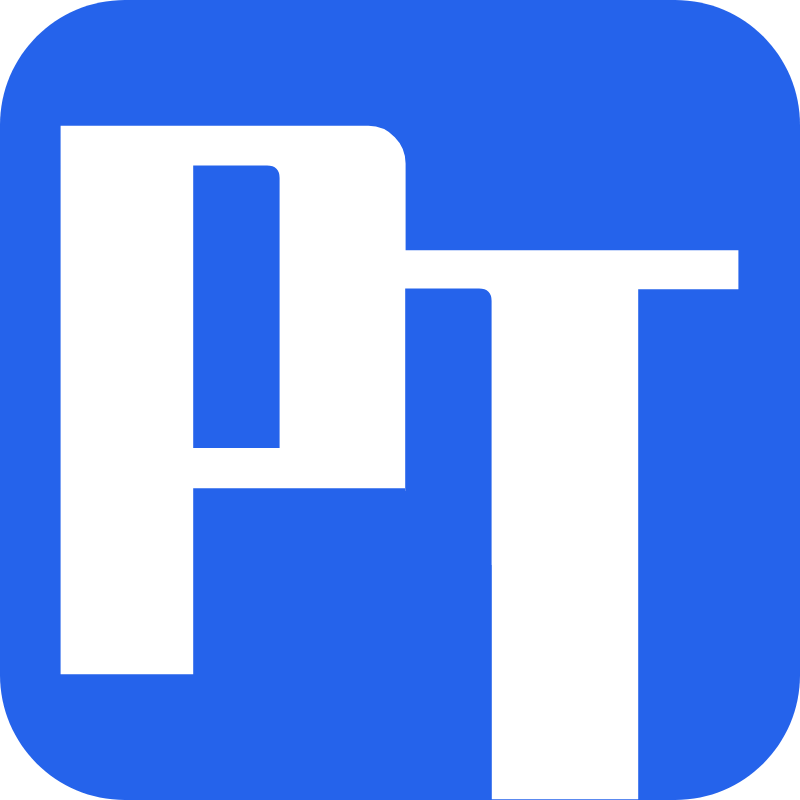
<style>
.page{position:relative;width:800px;height:800px;background:#2563eb}
.page>*{position:absolute;margin:0}
.t1{font:600px "ZhenyanGB-Regular";color:#ffffff}
</style>
<div class="page">
<p class="t1" style="left:60px;top:125px;width:346px;height:550px">P</p>
<p class="t1" style="left:391px;top:250px;width:348px;height:550px">T</p>
</div>
